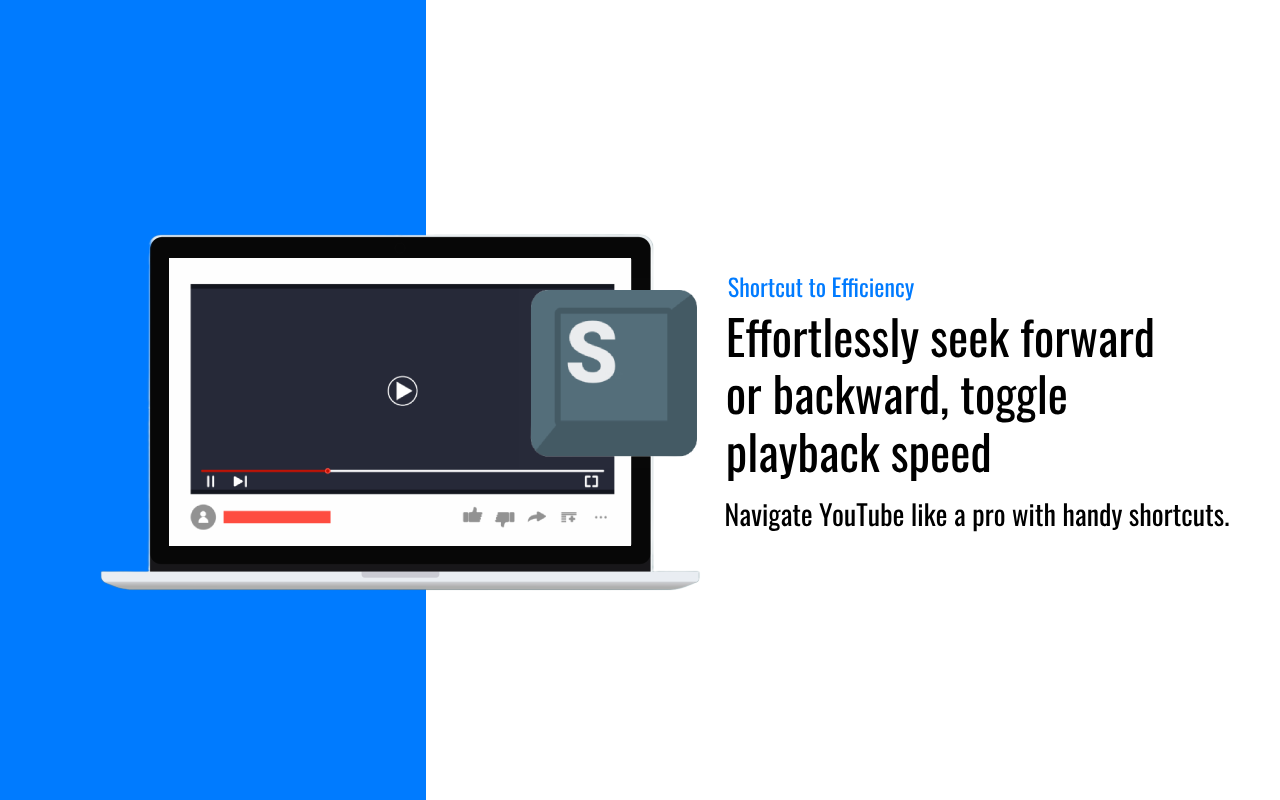
<style>
.page{position:relative;width:1280px;height:800px;background:#ffffff}
.page>*{position:absolute;margin:0}
.t1{font:24px "Oswald-Regular";color:#007bff}
.t2{font:48px "Oswald-Regular";color:#000000}
.t3{font:28px "Oswald-Regular";color:#000000}
</style>
<div class="page">
<p class="t1" style="left:728px;top:277px;width:186px;height:24px">Shortcut to Efficiency</p>
<p class="t2" style="left:727px;top:318px;width:426px;height:164px">Effortlessly seek forward <br>or backward, toggle <br>playback speed</p>
<p class="t3" style="left:726px;top:503px;width:503px;height:29px">Navigate YouTube like a pro with handy shortcuts.</p>
</div>
